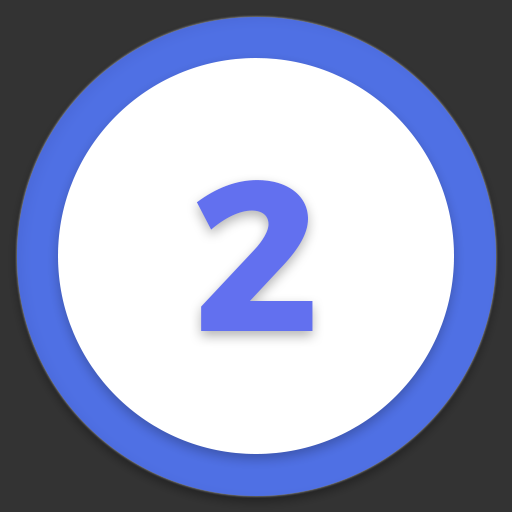
<style>
.page{position:relative;width:512px;height:512px;background:#ffffff}
.page>*{position:absolute;margin:0}
.t1{font:212.5px "Montserrat-Bold";color:#6270ef;text-transform:uppercase}
</style>
<div class="page">
<p class="t1" style="left:196px;top:180px;width:117px;height:151px">2</p>
</div>
